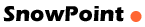
<style>
.page{position:relative;width:145px;height:27px;background:#ffffff}
.page>*{position:absolute;margin:0}
.t1{font:22px "ErasITC-Bold";color:#000000}
.t2{font:72px "CenturyGothic-Bold";color:#ff6633}
</style>
<div class="page">
<p class="t1" style="left:3px;top:6px;width:139px;height:16px">SnowPoint <span class="t2">.</span></p>
</div>
